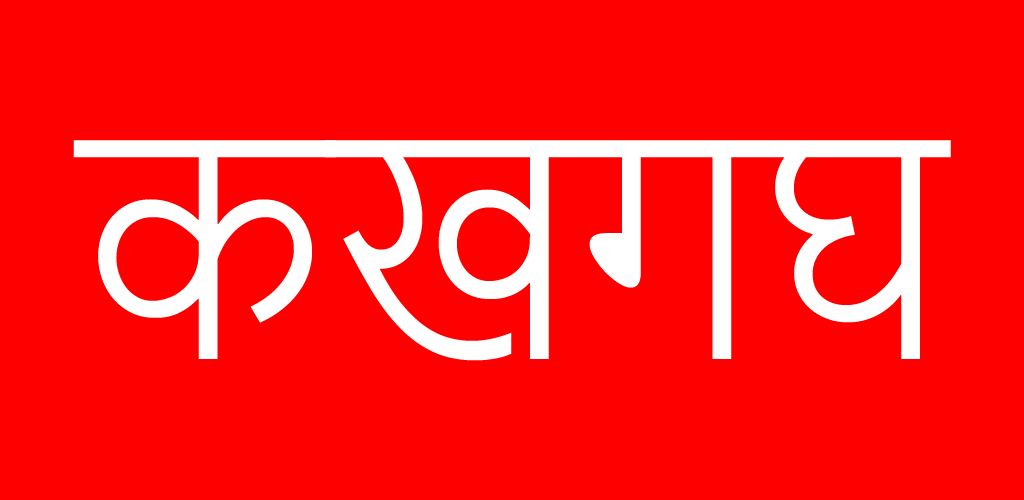
<style>
.page{position:relative;width:1024px;height:500px;background:#ff0000}
.page>*{position:absolute;margin:0}
.t1{font:300px "NirmalaUI-Semilight";color:#ffffff}
</style>
<div class="page">
<p class="t1" style="left:73px;top:140px;width:878px;height:221px">कखगघ</p>
</div>
